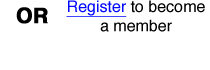
<style>
.page{position:relative;width:210px;height:70px;background:#ffffff}
.page>*{position:absolute;margin:0}
.t1{font:16px "Helvetica";color:#000000}
.t2{font:16px "Helvetica";color:#0208ff;text-decoration:underline}
.t3{font:21px "Helvetica-Bold";color:#000000;font-weight:bold}
</style>
<div class="page">
<p class="t1" style="left:66px;top:0px;width:139px;height:32px;text-align:center"><span class="t2">Register</span> to become<br>a member</p>
<p class="t3" style="left:16px;top:7px;width:32px;height:17px">OR</p>
</div>
